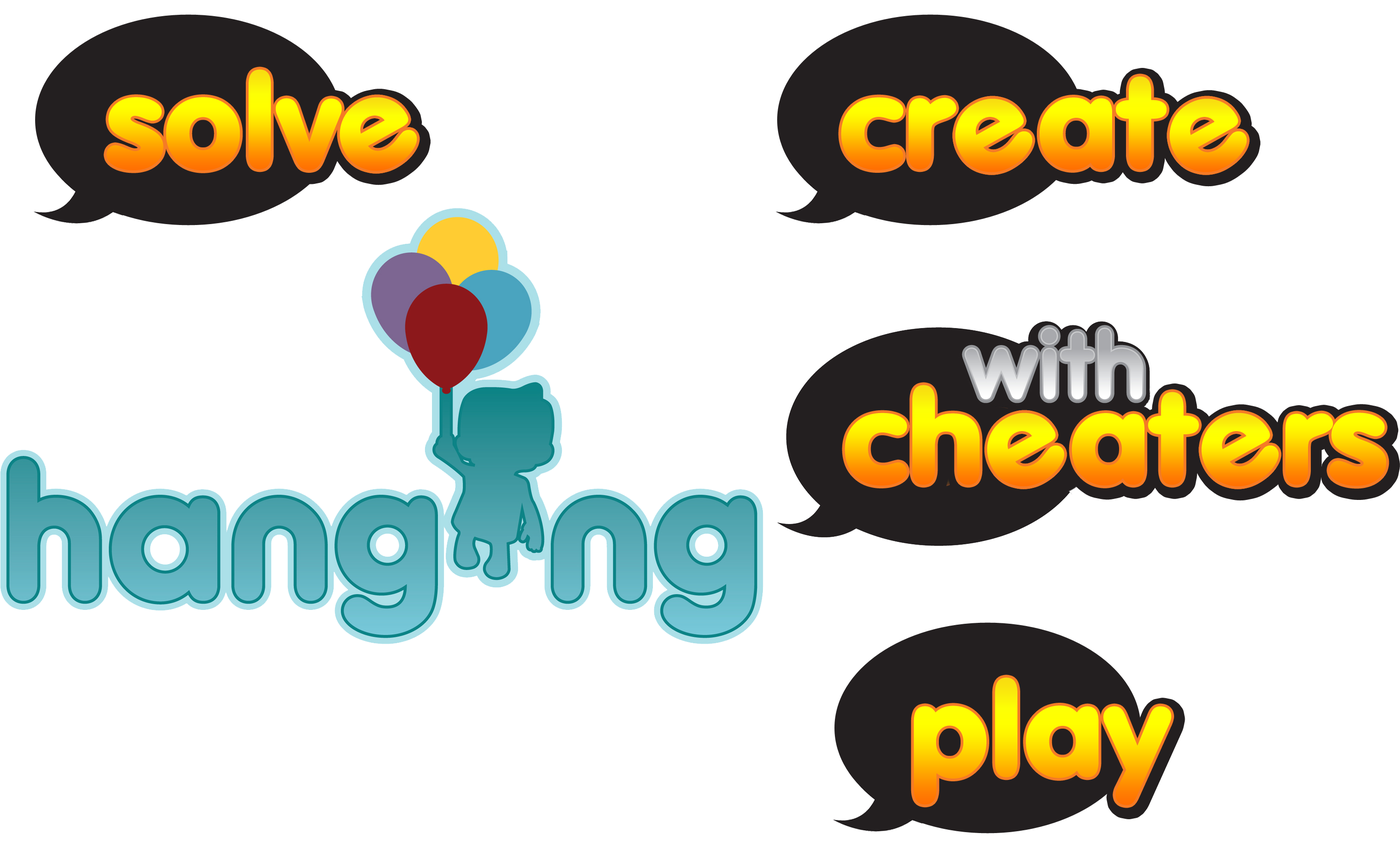
<style>
.page{position:relative;width:1400px;height:852px;background:#ffffff}
.page>*{position:absolute;margin:0}
.t1{font:128px "VAGRoundedBT-Regular";letter-spacing:-0.04em;font-weight:bold;scale:1.07 1}
</style>
<div class="page">
<p class="t1" style="left:106px;top:69px;width:236px;height:101px">solv</p>
<p class="t1" style="left:841px;top:76px;width:325px;height:94px">cr  at</p>
<p class="t1" style="left:340px;top:97px;width:77px;height:74px;rotate:-29deg">e</p>
<p class="t1" style="left:340px;top:97px;width:77px;height:74px;rotate:-29deg">e</p>
<p class="t1" style="left:955px;top:98px;width:78px;height:74px;rotate:-29deg">e</p>
<p class="t1" style="left:955px;top:98px;width:78px;height:74px;rotate:-29deg">e</p>
<p class="t1" style="left:1169px;top:98px;width:78px;height:74px;rotate:-29deg">e</p>
<p class="t1" style="left:1169px;top:98px;width:78px;height:74px;rotate:-29deg">e</p>
<p class="t1" style="left:844px;top:385px;width:542px;height:101px">ch  at  rs</p>
<p class="t1" style="left:987px;top:413px;width:77px;height:73px;rotate:-29deg">e</p>
<p class="t1" style="left:987px;top:413px;width:77px;height:73px;rotate:-29deg">e</p>
<p class="t1" style="left:1201px;top:413px;width:78px;height:73px;rotate:-29deg">e</p>
<p class="t1" style="left:1201px;top:413px;width:78px;height:73px;rotate:-29deg">e</p>
<p class="t1" style="left:913px;top:677px;width:258px;height:128px">play</p>
</div>
